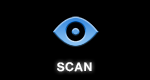
<style>
.page{position:relative;width:150px;height:80px;background:#000000}
.page>*{position:absolute;margin:0}
.t1{font:12px "AlteHaasGrotesk_Bold";letter-spacing:0.05em;color:#ffffff}
</style>
<div class="page">
<p class="t1" style="left:57px;top:62px;width:35px;height:10px">SCAN</p>
</div>
